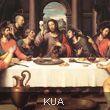
<style>
.page{position:relative;width:110px;height:110px}
.page>*{position:absolute;margin:0}
.t1{font:10px "ArialMT";color:#d4cbc9}
</style>
<div class="page">
<p class="t1" style="left:44px;top:98px;width:20px;height:7px">KUA</p>
</div>
